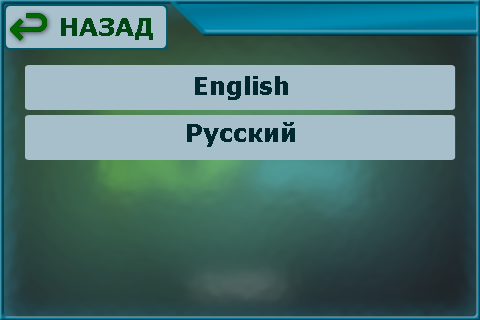
<style>
.page{position:relative;width:480px;height:320px;background:#a6bfcb}
.page>*{position:absolute;margin:0}
.t1{font:24px "Verdana-Bold";color:#004612}
.t2{font:24px "Verdana-Bold";color:#00272e}
</style>
<div class="page">
<p class="t1" style="left:61px;top:18px;width:92px;height:22px">НАЗАД</p>
<p class="t2" style="left:195px;top:76px;width:93px;height:24px">English</p>
<p class="t2" style="left:187px;top:122px;width:108px;height:25px">Русский</p>
</div>
